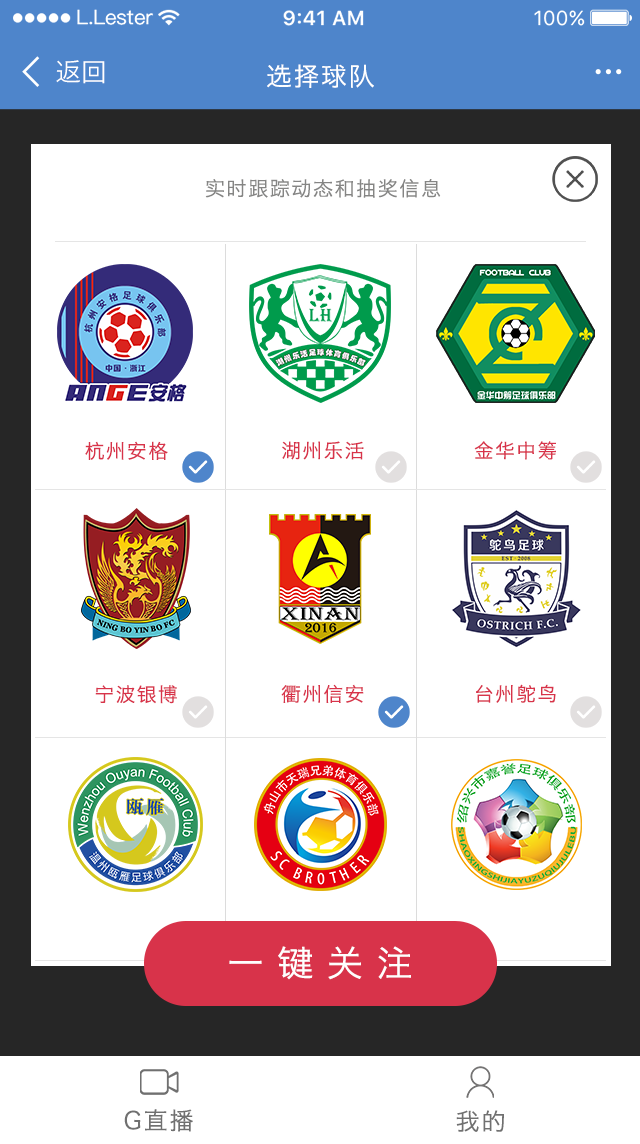
<style>
.page{position:relative;width:640px;height:1144px;background:#ffffff}
.page>*{position:absolute;margin:0}
.t1{font:25.6px "HiraginoSansGB-W3";color:#ffffff}
.t2{font:25.4px "HiraginoSansGB-W3";letter-spacing:0.08em;color:#ffffff}
.t3{font:20px "HiraginoSansGB-W3";letter-spacing:0.08em;color:#858584}
.t4{font:19.6px "HiraginoSansGB-W3";letter-spacing:0.08em;color:#d8334a}
.t5{font:19.5px "HiraginoSansGB-W3";letter-spacing:0.08em;color:#d8334a}
.t6{font:36px "HiraginoSansGB-W3";letter-spacing:0.38em;color:#fefefe}
.t7{font:24px "HiraginoSansGB-W3";letter-spacing:0.08em;color:#707070}
</style>
<div class="page">
<p class="t1" style="left:56px;top:60px;width:49px;height:24px">返回</p>
<p class="t2" style="left:267px;top:64px;width:107px;height:24px">选择球队</p>
<p class="t3" style="left:205px;top:179px;width:236px;height:19px">实时跟踪动态和抽奖信息</p>
<p class="t4" style="left:85px;top:441px;width:83px;height:19px">杭州安格</p>
<p class="t5" style="left:282px;top:441px;width:82px;height:19px">湖州乐活</p>
<p class="t5" style="left:474px;top:441px;width:82px;height:19px">金华中筹</p>
<p class="t4" style="left:95px;top:685px;width:82px;height:19px">宁波银博</p>
<p class="t5" style="left:281px;top:684px;width:83px;height:19px">衢州信安</p>
<p class="t5" style="left:476px;top:684px;width:80px;height:19px">台州鸵鸟</p>
<p class="t6" style="left:229px;top:946px;width:182px;height:34px">一键关注</p>
<p class="t7" style="left:124px;top:1109px;width:69px;height:23px">G直播</p>
<p class="t7" style="left:456px;top:1110px;width:48px;height:22px">我的</p>
</div>
